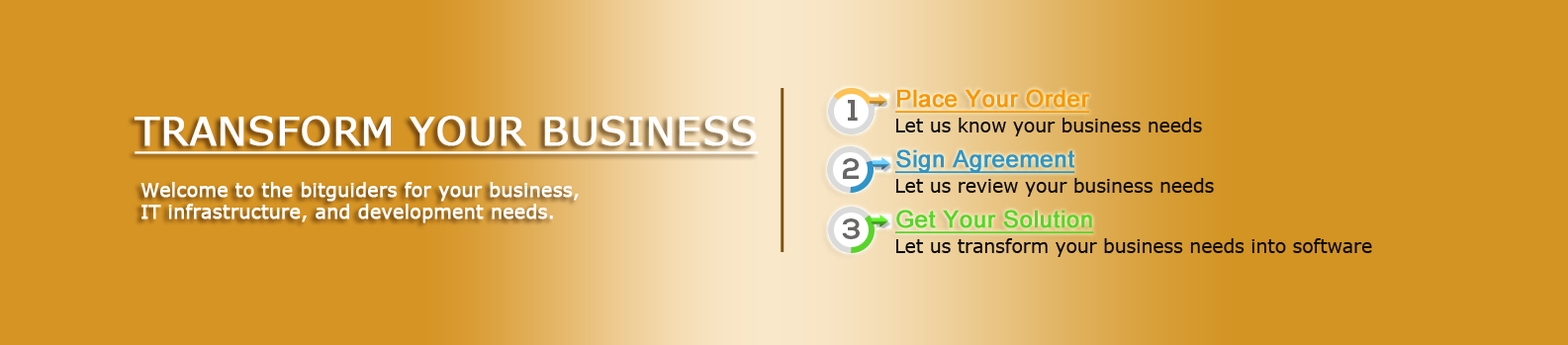
<style>
.page{position:relative;width:1568px;height:345px;background:#d69424}
.page>*{position:absolute;margin:0}
.t1{font:23.7px "ArialMT";color:#fb9500;font-weight:bold;text-decoration:underline}
.t2{font:39.6px "Verdana";color:#fffefe;font-weight:bold;text-decoration:underline}
.t3{font:18.5px "Verdana";color:#0c0b0b}
.t4{font:23.7px "ArialMT";color:#3094c6;font-weight:bold;text-decoration:underline}
.t5{font:18.5px "Verdana";color:#ffffff;font-weight:bold}
.t6{font:23.7px "ArialMT";color:#59d429;font-weight:bold;text-decoration:underline}
</style>
<div class="page">
<p class="t1" style="left:895px;top:89px;width:195px;height:24px">Place Your Order</p>
<p class="t2" style="left:135px;top:116px;width:624px;height:38px">TRANSFORM YOUR BUSINESS</p>
<p class="t3" style="left:896px;top:118px;width:306px;height:19px">Let us know your business needs</p>
<p class="t4" style="left:895px;top:149px;width:180px;height:24px">Sign Agreement</p>
<p class="t5" style="left:140px;top:182px;width:439px;height:42px">Welcome to the bitguiders for your business, <br>IT infrastructure, and development needs.</p>
<p class="t3" style="left:896px;top:178px;width:318px;height:19px">Let us review your business needs</p>
<p class="t6" style="left:895px;top:210px;width:199px;height:23px">Get Your Solution</p>
<p class="t3" style="left:896px;top:238px;width:476px;height:19px">Let us transform your business needs into software</p>
</div>
